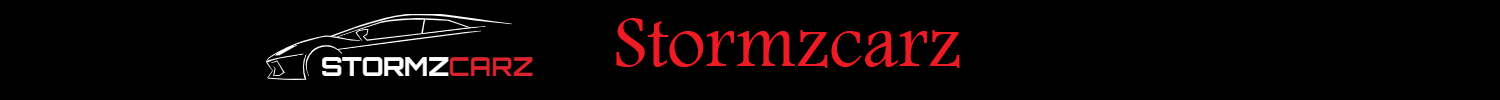
<style>
.page{position:relative;width:1500px;height:100px;background:#000000}
.page>*{position:absolute;margin:0}
.t1{font:75px "FootlightMTLight";color:#ed1c24}
</style>
<div class="page">
<p class="t1" style="left:616px;top:18px;width:344px;height:50px">Stormzcarz</p>
</div>
